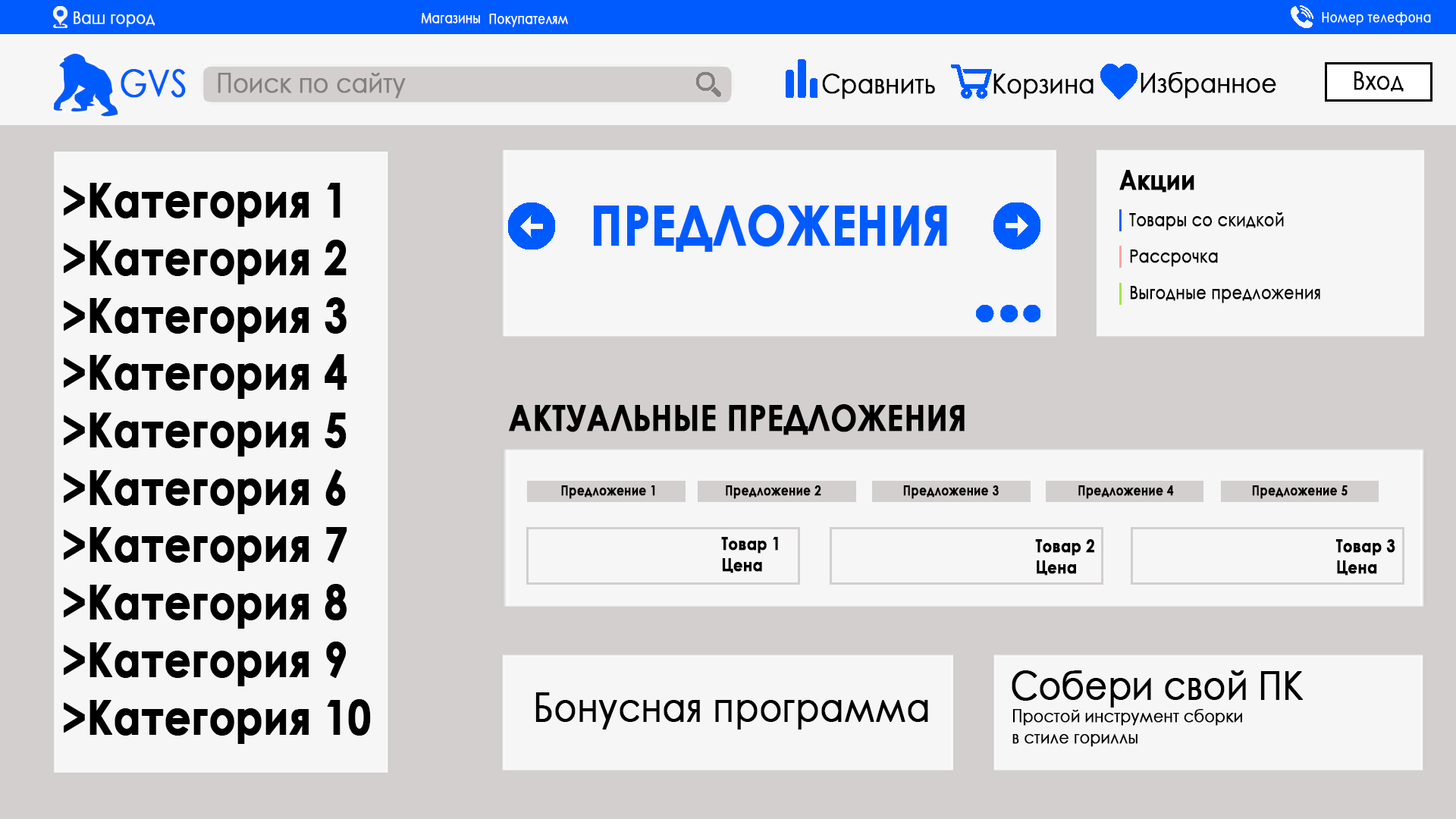
<style>
.page{position:relative;width:1456px;height:819px;background:#f6f6f6}
.page>*{position:absolute;margin:0}
.t1{font:13.6px "CenturyGothic";color:#ffffff;font-weight:bold;scale:0.85 1}
.t2{font:37.3px "CenturyGothic";color:#005bff;font-weight:bold;scale:0.85 1}
.t3{font:27.3px "CenturyGothic";color:#838080;font-weight:bold;scale:0.85 1}
.t4{font:27.3px "CenturyGothic";color:#000000;font-weight:bold;scale:0.85 1}
.t5{font:25px "CenturyGothic";color:#000000;font-weight:bold;scale:0.85 1}
.t6{font:27.3px "CenturyGothic-Bold";color:#000000;font-weight:bold;scale:0.85 1}
.t7{font:47.8px "CenturyGothic-Bold";color:#000000;font-weight:bold;scale:0.85 1}
.t8{font:54.6px "CenturyGothic-Bold";color:#005bff;font-weight:bold;scale:0.85 1}
.t9{font:18.2px "CenturyGothic";color:#000000;font-weight:bold;scale:0.85 1}
.t10{font:36.4px "CenturyGothic-Bold";color:#000000;font-weight:bold;scale:0.85 1}
.t11{font:13.6px "CenturyGothic-Bold";color:#000000;font-weight:bold;scale:0.85 1}
.t12{font:17.7px "CenturyGothic-Bold";color:#000000;font-weight:bold;scale:0.85 1}
.t13{font:39.8px "CenturyGothic";color:#000000;font-weight:bold;scale:0.85 1}
.t14{font:40.3px "CenturyGothic";color:#000000;font-weight:bold;scale:0.85 1}
.t15{font:17.8px "CenturyGothic";color:#000000;font-weight:bold;scale:0.85 1}
</style>
<div class="page">
<p class="t1" style="left:421px;top:13px;width:59px;height:11px">Магазины</p>
<p class="t1" style="left:489px;top:14px;width:79px;height:13px">Покупателям</p>
<p class="t2" style="left:121px;top:69px;width:65px;height:29px">GVS</p>
<p class="t3" style="left:218px;top:73px;width:188px;height:26px">Поиск по сайту</p>
<p class="t4" style="left:822px;top:74px;width:113px;height:25px">Сравнить</p>
<p class="t4" style="left:993px;top:74px;width:101px;height:25px">Корзина</p>
<p class="t4" style="left:1141px;top:72px;width:135px;height:27px">Избранное</p>
<p class="t5" style="left:1354px;top:71px;width:50px;height:21px">Вход</p>
<p class="t6" style="left:1119px;top:170px;width:75px;height:23px">Акции</p>
<p class="t7" style="left:64px;top:183px;width:307px;height:561px">&gt;Категория 1<br>&gt;Категория 2<br>&gt;Категория 3<br>&gt;Категория 4<br>&gt;Категория 5<br>&gt;Категория 6<br>&gt;Категория 7<br>&gt;Категория 8<br>&gt;Категория 9<br>&gt;Категория 10</p>
<p class="t8" style="left:593px;top:205px;width:354px;height:47px">ПРЕДЛОЖЕНИЯ</p>
<p class="t9" style="left:1129px;top:212px;width:155px;height:19px">Товары со скидкой</p>
<p class="t9" style="left:1130px;top:249px;width:88px;height:18px">Рассрочка</p>
<p class="t9" style="left:1130px;top:286px;width:190px;height:17px">Выгодные предложения</p>
<p class="t10" style="left:509px;top:404px;width:456px;height:31px">АКТУАЛЬНЫЕ ПРЕДЛОЖЕНИЯ</p>
<p class="t11" style="left:561px;top:485px;width:94px;height:14px">Предложение 1</p>
<p class="t11" style="left:726px;top:485px;width:95px;height:14px">Предложение 2</p>
<p class="t11" style="left:903px;top:485px;width:96px;height:14px">Предложение 3</p>
<p class="t11" style="left:1078px;top:485px;width:96px;height:14px">Предложение 4</p>
<p class="t11" style="left:1252px;top:485px;width:96px;height:14px">Предложение 5</p>
<p class="t12" style="left:721px;top:537px;width:57px;height:36px">Товар 1<br>Цена</p>
<p class="t12" style="left:1035px;top:539px;width:59px;height:37px">Товар 2<br>Цена</p>
<p class="t12" style="left:1335px;top:539px;width:60px;height:37px">Товар 3<br>Цена</p>
<p class="t13" style="left:1012px;top:670px;width:291px;height:38px">Собери свой ПК</p>
<p class="t14" style="left:535px;top:692px;width:393px;height:38px">Бонусная программа</p>
<p class="t15" style="left:1012px;top:709px;width:230px;height:38px">Простой инструмент сборки<br>в стиле гориллы</p>
</div>
